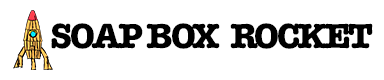
<style>
.page{position:relative;width:384px;height:80px;background:#ffffff}
.page>*{position:absolute;margin:0}
.t1{font:36px "AmericanTypewriter-Bold";letter-spacing:-0.075em;color:#000000;text-transform:uppercase}
</style>
<div class="page">
<p class="t1" style="left:51px;top:23px;width:322px;height:26px">Soap Box  Rocket</p>
</div>
